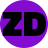
<style>
.page{position:relative;width:48px;height:48px;background:#840cd0}
.page>*{position:absolute;margin:0}
.t1{font:36px "Cairo-Black";color:#000000}
</style>
<div class="page">
<p class="t1" style="left:2px;top:12px;width:44px;height:24px">ZD</p>
</div>
